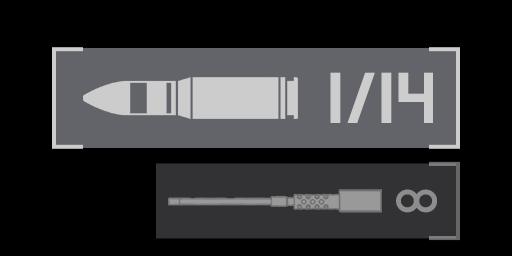
<style>
.page{position:relative;width:512px;height:256px;background:#000000}
.page>*{position:absolute;margin:0}
.t1{font:71.9px "SquareFont";color:#cdcdcd}
.t2{font:63.1px "SquareFont";color:#8d8d8e}
</style>
<div class="page">
<p class="t1" style="left:330px;top:72px;width:103px;height:51px">1/14</p>
<p class="t2" style="left:396px;top:189px;width:41px;height:24px">∞</p>
</div>
